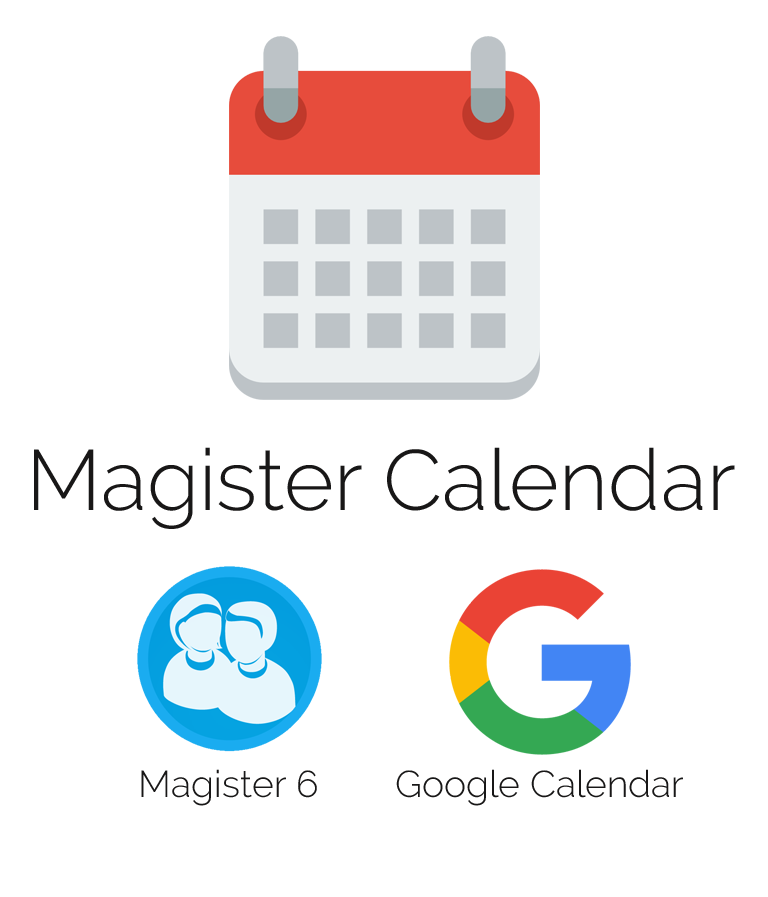
<style>
.page{position:relative;width:768px;height:897px;background:#ffffff}
.page>*{position:absolute;margin:0}
.t1{font:85.3px "Raleway-Light";color:#181717}
.t2{font:37.3px "Raleway-Light";color:#181717}
</style>
<div class="page">
<p class="t1" style="left:34px;top:447px;width:701px;height:82px">Magister Calendar</p>
<p class="t2" style="left:141px;top:769px;width:176px;height:37px">Magister 6</p>
<p class="t2" style="left:396px;top:769px;width:287px;height:37px">Google Calendar</p>
</div>
